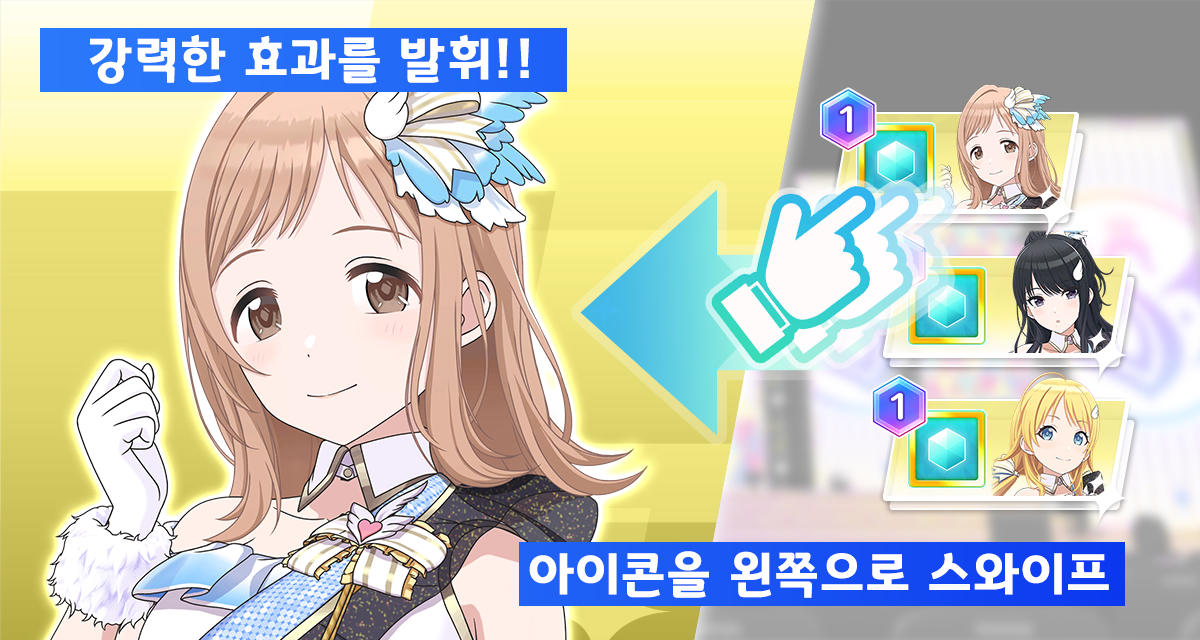
<style>
.page{position:relative;width:1200px;height:640px}
.page>*{position:absolute;margin:0}
.t1{font:50.7px "GyeonggiTitleB";letter-spacing:0.05em;color:#fffefe}
</style>
<div class="page">
<p class="t1" style="left:89px;top:34px;width:440px;height:50px">강력한 효과를 발휘!!</p>
<p class="t1" style="left:529px;top:551px;width:580px;height:47px">아이콘을 왼쪽으로 스와이프</p>
</div>
